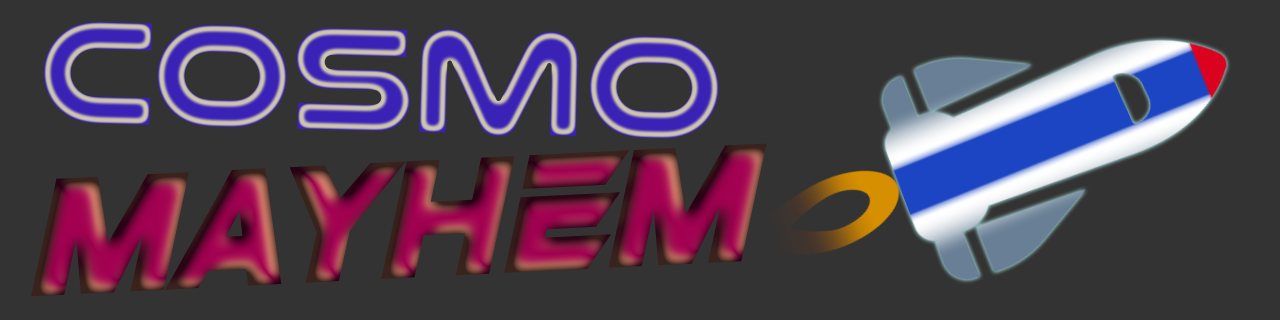
<style>
.page{position:relative;width:1280px;height:320px;background:#333333}
.page>*{position:absolute;margin:0}
.t1{font:150px "Nulshock-Bold"}
.t2{font:170px "SuperSliced-Italic"}
</style>
<div class="page">
<p class="t1" style="left:43px;top:22px;width:676px;height:117px;rotate:1deg">Cosmo</p>
<p class="t2" style="left:31px;top:143px;width:736px;height:154px;rotate:-3deg">MAYHEM</p>
</div>
